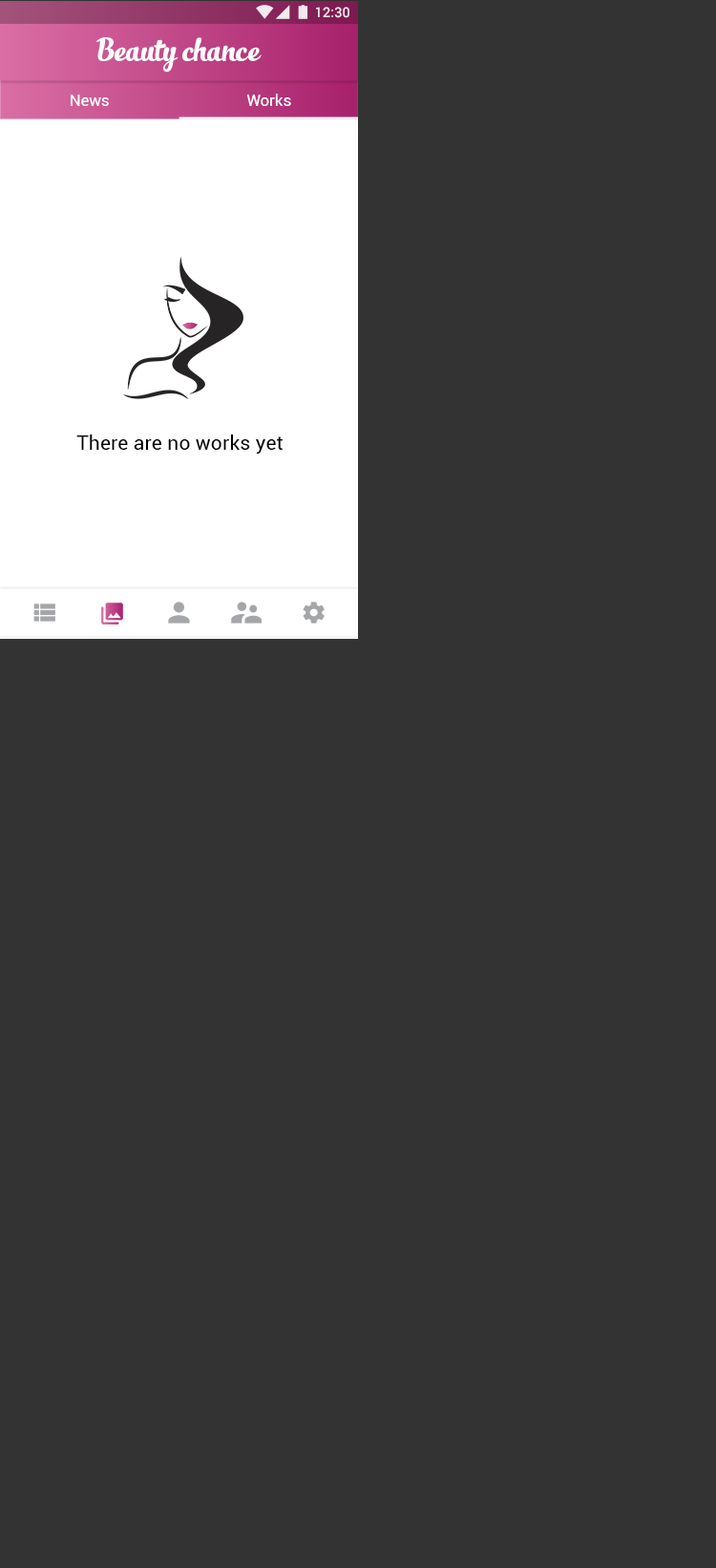
<style>
.page{position:relative;width:716px;height:1568px;background:#333333}
.page>*{position:absolute;margin:0}
.t1{font:13.9px "Roboto-Medium";color:#ffffff}
.t2{font:23.9px "SlimTony-Italic";color:#ffffff}
.t3{font:15.9px "Roboto-Regular";color:#ffffff}
.t4{font:19.9px "Roboto-Regular";letter-spacing:0.01em;color:#000000}
</style>
<div class="page">
<p class="t1" style="left:316px;top:7px;width:34px;height:11px">12:30</p>
<p class="t2" style="left:96px;top:37px;width:166px;height:36px">Beauty chance</p>
<p class="t3" style="left:71px;top:95px;width:38px;height:11px">News</p>
<p class="t3" style="left:246px;top:94px;width:45px;height:12px">Works</p>
<p class="t4" style="left:76px;top:434px;width:207px;height:20px">There are no works yet</p>
</div>
